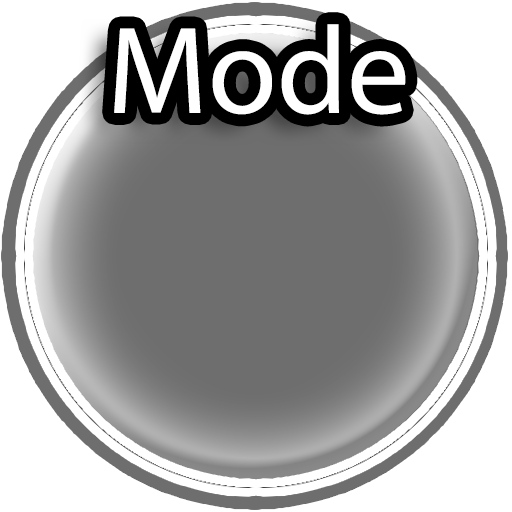
<style>
.page{position:relative;width:512px;height:512px;background:#ffffff}
.page>*{position:absolute;margin:0}
.t1{font:125px "MyriadPro-Regular";color:#ffffff}
</style>
<div class="page">
<p class="t1" style="left:114px;top:24px;width:292px;height:91px">Mode</p>
</div>
